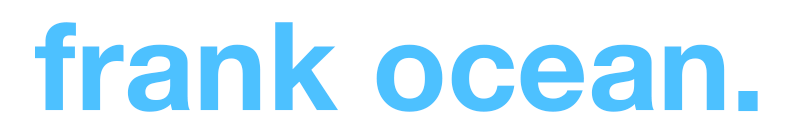
<style>
.page{position:relative;width:800px;height:115px;background:#ffffff}
.page>*{position:absolute;margin:0}
.t1{font:122.9px "HelveticaNeueBold";color:#4dc1ff}
</style>
<div class="page">
<p class="t1" style="left:35px;top:22px;width:723px;height:90px">frank ocean.</p>
</div>
